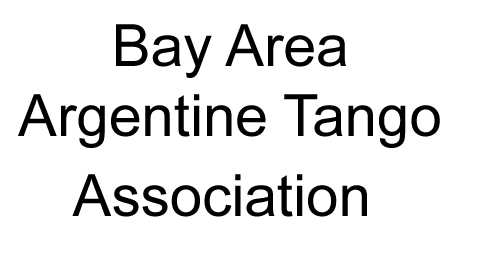
<style>
.page{position:relative;width:480px;height:270px;background:#ffffff}
.page>*{position:absolute;margin:0}
.t1{font:58.3px "ArialMT";color:#000000}
</style>
<div class="page">
<p class="t1" style="left:18px;top:24px;width:422px;height:193px;text-align:center">Bay Area<br>Argentine Tango<br>Association</p>
</div>
